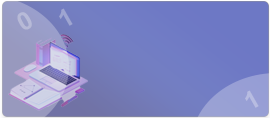
<style>
.page{position:relative;width:270px;height:118px}
.page>*{position:absolute;margin:0}
.t1{font:25px "Arial-BoldMT";color:#b7b9d6}
.t2{font:25px "Arial-BoldMT";color:#9ea5d1}
.t3{font:25px "Arial-BoldMT";color:#b7bce1}
</style>
<div class="page">
<p class="t1" style="left:17px;top:12px;width:15px;height:18px;rotate:-30deg">0</p>
<p class="t2" style="left:59px;top:8px;width:14px;height:18px;rotate:-30deg">1</p>
<p class="t3" style="left:245px;top:90px;width:14px;height:18px;rotate:-30deg">1</p>
</div>
